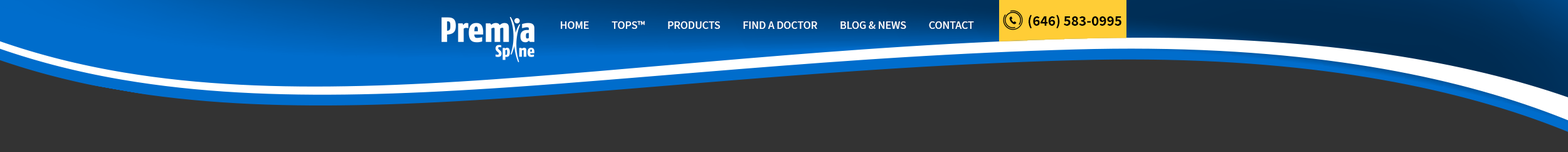
<style>
.page{position:relative;width:1568px;height:152px;background:#333333}
.page>*{position:absolute;margin:0}
.t1{font:14.7px "Assistant-Bold";color:#000000}
.t2{font:11.3px "Assistant-SemiBold";color:#ffffff}
</style>
<div class="page">
<p class="t1" style="left:1029px;top:14px;width:92px;height:15px">(646) 583-0995</p>
<p class="t2" style="left:561px;top:21px;width:413px;height:8px">HOME          TOPS™          PRODUCTS          FIND A DOCTOR          BLOG &amp; NEWS          CONTACT</p>
</div>
